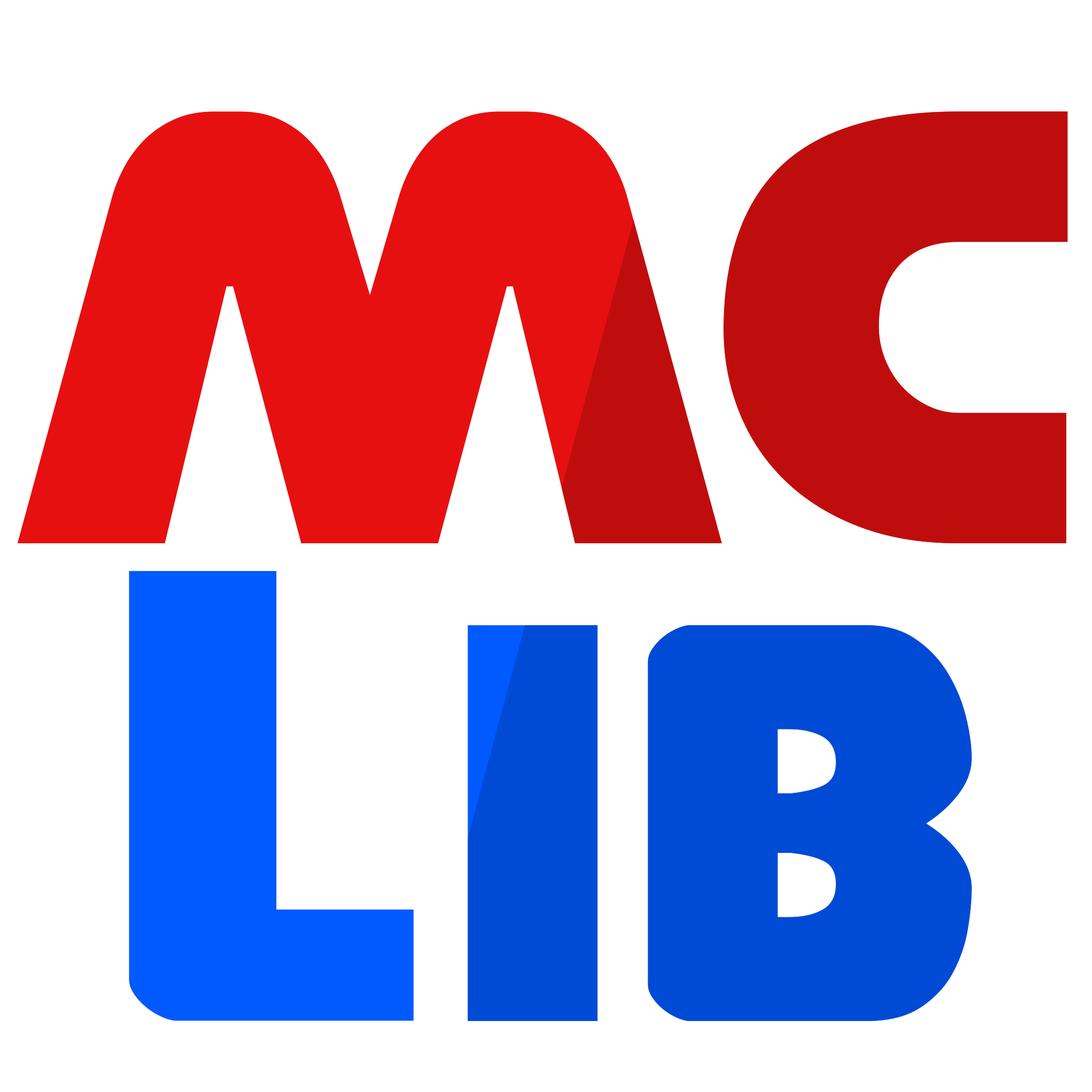
<style>
.page{position:relative;width:1092px;height:1092px;background:#ffffff}
.page>*{position:absolute;margin:0}
.t1{font:655.2px/477.7px "GovernorExpanded"}
.t2{font:682.5px/477.7px "GovernorExpanded";letter-spacing:0.01em}
.t3{font:600.6px/477.7px "GovernorExpanded";letter-spacing:0.01em}
</style>
<div class="page">
<p class="t1" style="left:17px;top:111px;width:1051px;height:910px;text-align:center">MC<br><span class="t2">L</span><span class="t3">ib</span></p>
<p class="t1" style="left:17px;top:111px;width:1051px;height:910px;text-align:center">MC<br><span class="t2">L</span><span class="t3">ib</span></p>
</div>
